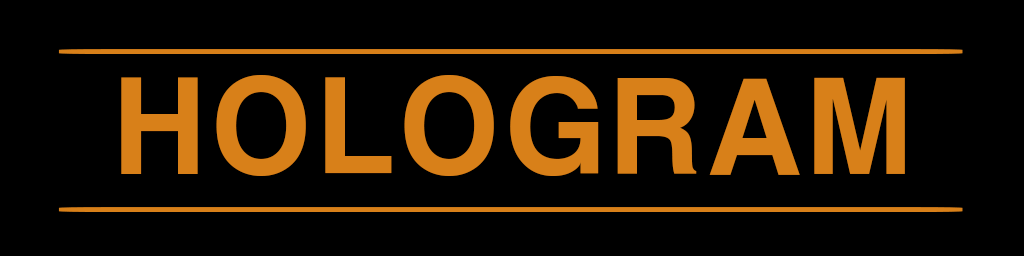
<style>
.page{position:relative;width:1024px;height:256px;background:#000000}
.page>*{position:absolute;margin:0}
.t1{font:41px "ConthraxSb-Regular";color:#d88019;scale:65.38 1}
.t2{font:125.4px "H2gtrE";color:#d88019}
</style>
<div class="page">
<p class="t1" style="left:58px;top:49px;width:905px;height:5px">-</p>
<p class="t2" style="left:121px;top:75px;width:784px;height:101px">HOLOGRAM</p>
<p class="t1" style="left:58px;top:207px;width:905px;height:5px">-</p>
</div>
